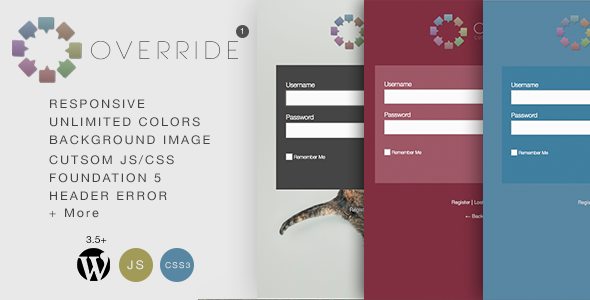
<style>
.page{position:relative;width:590px;height:300px;background:#e9e9e9}
.page>*{position:absolute;margin:0}
.t1{font:8px "HelveticaNeue";color:#ffffff;scale:1.04 1}
.t2{font:24px "Laranjha-Pro-Fraco";letter-spacing:0.2em;scale:1.04 1}
.t3{font:12px "HelveticaNeue";letter-spacing:0.16em;color:#454545;scale:1.04 1}
.t4{font:10px "HelveticaNeue";color:#000000;scale:1.04 1}
.t5{font:12px "HelveticaNeue";letter-spacing:0.16em;color:#e9e9e9;scale:1.04 1}
.t6{font:8px "HelveticaNeue";letter-spacing:0.16em;scale:1.04 1}
</style>
<div class="page">
<p class="t1" style="left:240px;top:28px;width:3px;height:6px">1</p>
<p class="t2" style="left:91px;top:41px;width:147px;height:19px">OVERRIDE</p>
<p class="t3" style="left:50px;top:99px;width:95px;height:10px">RESPONSIVE</p>
<p class="t3" style="left:50px;top:117px;width:150px;height:10px">UNLIMITED COLORS</p>
<p class="t3" style="left:50px;top:135px;width:160px;height:10px">BACKGROUND IMAGE</p>
<p class="t3" style="left:49px;top:155px;width:125px;height:10px">CUTSOM JS/CSS</p>
<p class="t3" style="left:50px;top:173px;width:111px;height:10px">FOUNDATION 5</p>
<p class="t3" style="left:50px;top:191px;width:117px;height:10px">HEADER ERROR</p>
<p class="t3" style="left:49px;top:208px;width:50px;height:10px">+ More</p>
<p class="t4" style="left:86px;top:236px;width:21px;height:7px">3.5+</p>
<p class="t5" style="left:127px;top:260px;width:17px;height:10px">JS</p>
<p class="t6" style="left:165px;top:262px;width:25px;height:7px">CSS3</p>
</div>
